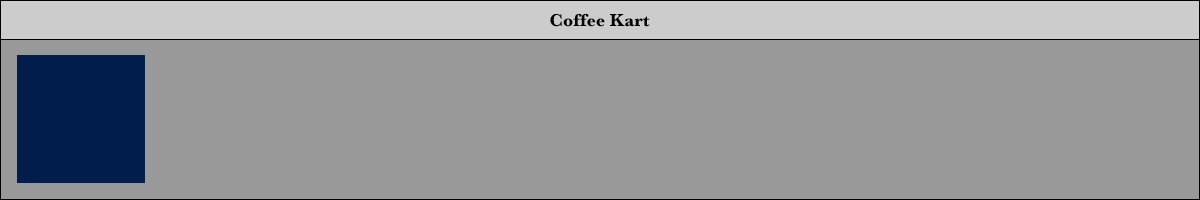
<style>
.page{position:relative;width:1200px;height:200px;background:#999999}
.page>*{position:absolute;margin:0}
.t1{font:18px "Baskerville-Bold";color:#000000}
</style>
<div class="page">
<p class="t1" style="left:550px;top:13px;width:100px;height:14px">Coffee Kart</p>
</div>
